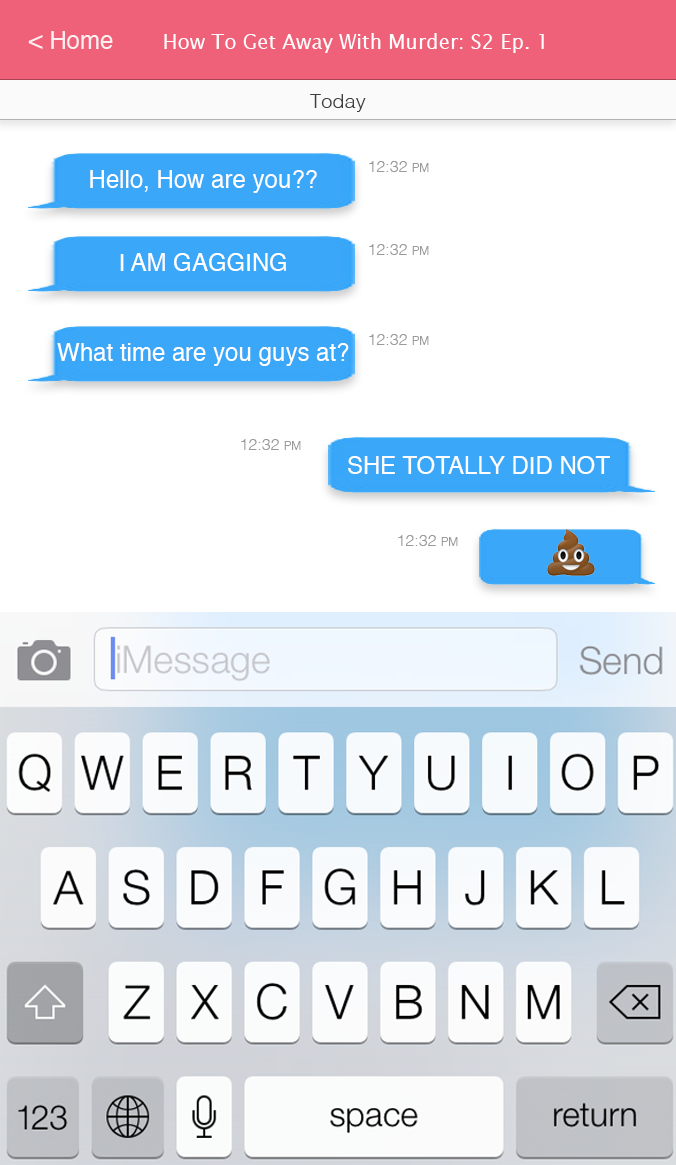
<style>
.page{position:relative;width:676px;height:1165px;background:#ffffff}
.page>*{position:absolute;margin:0}
.t1{font:24px "Helvetica";color:#ffffff}
.t2{font:20px "LucidaSans";color:#ffffff}
.t3{font:20px "Helvetica-Light";color:#3f3f3f}
.t4{font:16px "Helvetica-Light";color:#9a9a9a}
.t5{font:12px "Helvetica-Light";color:#9a9a9a}
.t6{font:12px/10px "Helvetica";color:#ffffff}
.t7{font:12px "Helvetica";color:#ffffff}
</style>
<div class="page">
<p class="t1" style="left:28px;top:31px;width:85px;height:18px;opacity:0.87">&lt; Home</p>
<p class="t2" style="left:164px;top:33px;width:380px;height:20px">How To Get Away With Murder: S2 Ep. 1</p>
<p class="t3" style="left:310px;top:94px;width:56px;height:18px">Today</p>
<p class="t4" style="left:369px;top:161px;width:60px;height:11px">12:32 <span class="t5">PM</span></p>
<p class="t6" style="left:90px;top:170px;width:227px;height:23px;text-align:center">Hello, How are you??</p>
<p class="t4" style="left:369px;top:244px;width:60px;height:11px">12:32 <span class="t5">PM</span></p>
<p class="t7" style="left:120px;top:253px;width:166px;height:18px">I AM GAGGING</p>
<p class="t4" style="left:369px;top:334px;width:60px;height:11px">12:32 <span class="t5">PM</span></p>
<p class="t6" style="left:57px;top:343px;width:292px;height:23px;text-align:center">What time are you guys at?</p>
<p class="t4" style="left:241px;top:439px;width:60px;height:11px">12:32 <span class="t5">PM</span></p>
<p class="t7" style="left:348px;top:456px;width:262px;height:18px">SHE TOTALLY DID NOT</p>
<p class="t4" style="left:398px;top:535px;width:60px;height:11px">12:32 <span class="t5">PM</span></p>
</div>
